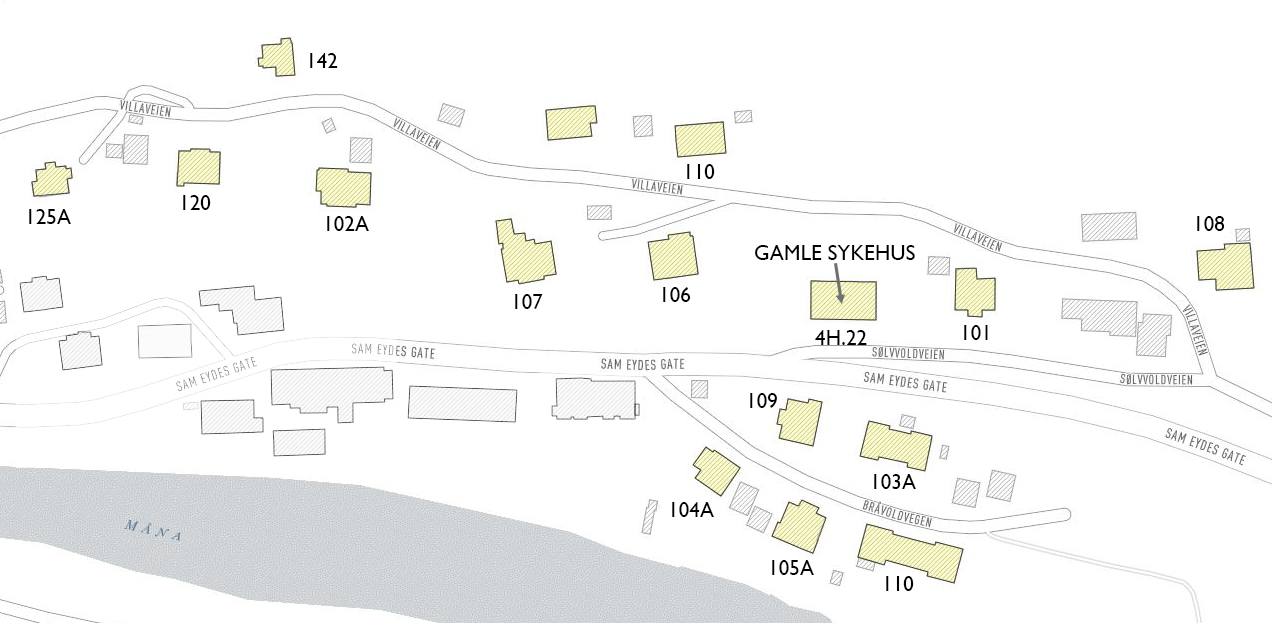
<style>
.page{position:relative;width:1272px;height:623px;background:#ffffff}
.page>*{position:absolute;margin:0}
.t1{font:21.3px "GillSansMT";color:#000000}
</style>
<div class="page">
<p class="t1" style="left:310px;top:53px;width:28px;height:15px">142</p>
<p class="t1" style="left:687px;top:164px;width:28px;height:15px">110</p>
<p class="t1" style="left:183px;top:195px;width:28px;height:15px">120</p>
<p class="t1" style="left:29px;top:209px;width:42px;height:15px">125A</p>
<p class="t1" style="left:327px;top:216px;width:42px;height:15px">102A</p>
<p class="t1" style="left:1197px;top:216px;width:28px;height:15px">108</p>
<p class="t1" style="left:755px;top:245px;width:160px;height:15px">GAMLE SYKEHUS</p>
<p class="t1" style="left:515px;top:294px;width:28px;height:15px">107</p>
<p class="t1" style="left:663px;top:287px;width:28px;height:15px">106</p>
<p class="t1" style="left:964px;top:325px;width:24px;height:15px">101</p>
<p class="t1" style="left:815px;top:330px;width:52px;height:15px">4H.22</p>
<p class="t1" style="left:750px;top:393px;width:27px;height:15px">109</p>
<p class="t1" style="left:874px;top:474px;width:42px;height:15px">103A</p>
<p class="t1" style="left:672px;top:502px;width:42px;height:15px">104A</p>
<p class="t1" style="left:772px;top:560px;width:42px;height:15px">105A</p>
<p class="t1" style="left:886px;top:576px;width:28px;height:15px">110</p>
</div>
